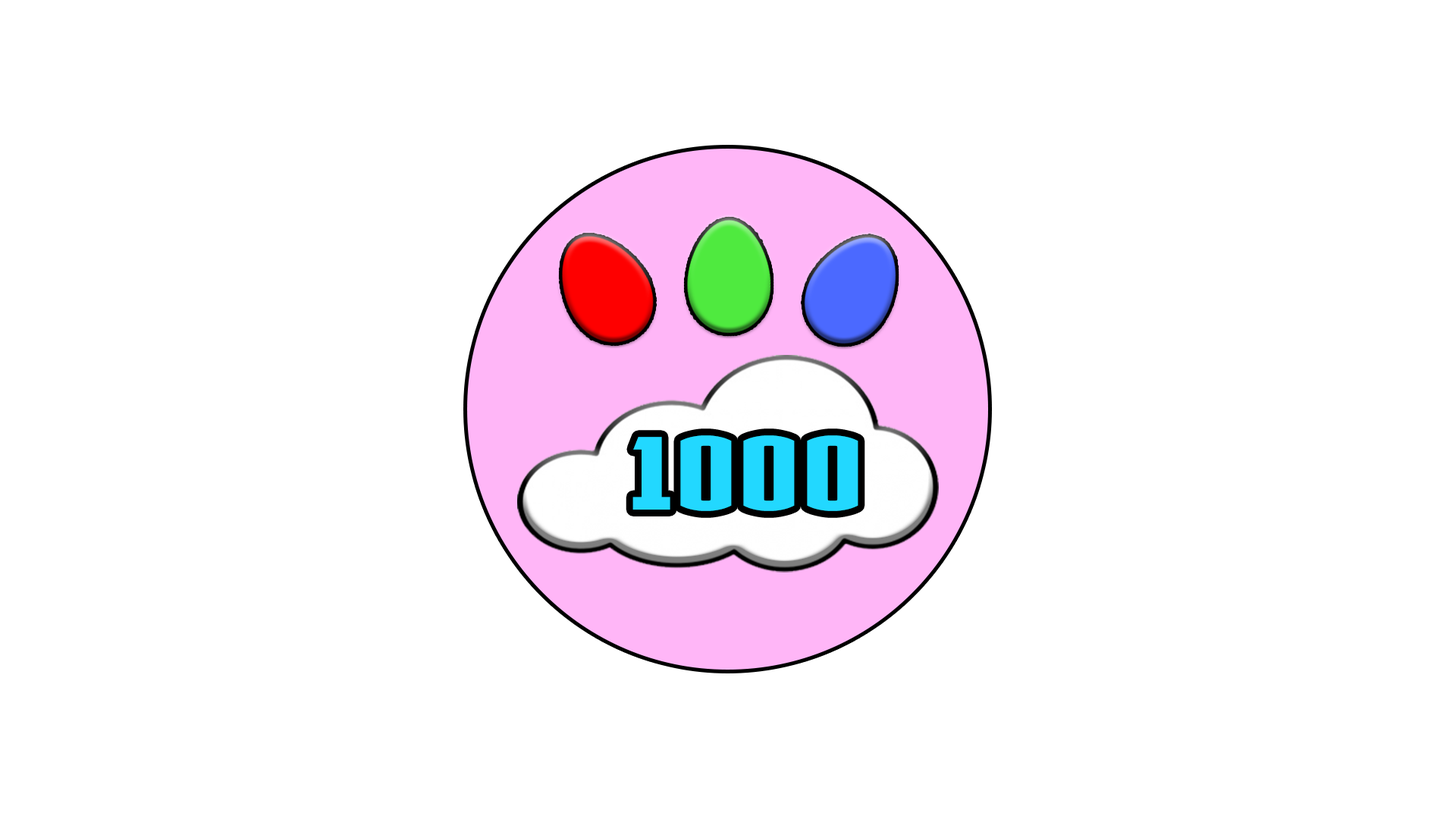
<style>
.page{position:relative;width:1456px;height:819px;background:#ffffff}
.page>*{position:absolute;margin:0}
.t1{font:99.8px "IRONMANOFWAR002NCV";letter-spacing:0.01em;color:#22d8ff;scale:1.41 1}
</style>
<div class="page">
<p class="t1" style="left:632px;top:435px;width:226px;height:76px">1000</p>
</div>
